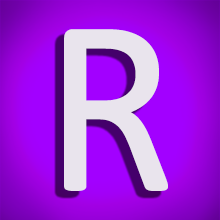
<style>
.page{position:relative;width:220px;height:220px}
.page>*{position:absolute;margin:0}
.t1{font:252.1px "Calibri";color:#ececec;font-weight:bold;scale:0.96 1}
</style>
<div class="page">
<p class="t1" style="left:64px;top:29px;width:104px;height:162px">R</p>
</div>
